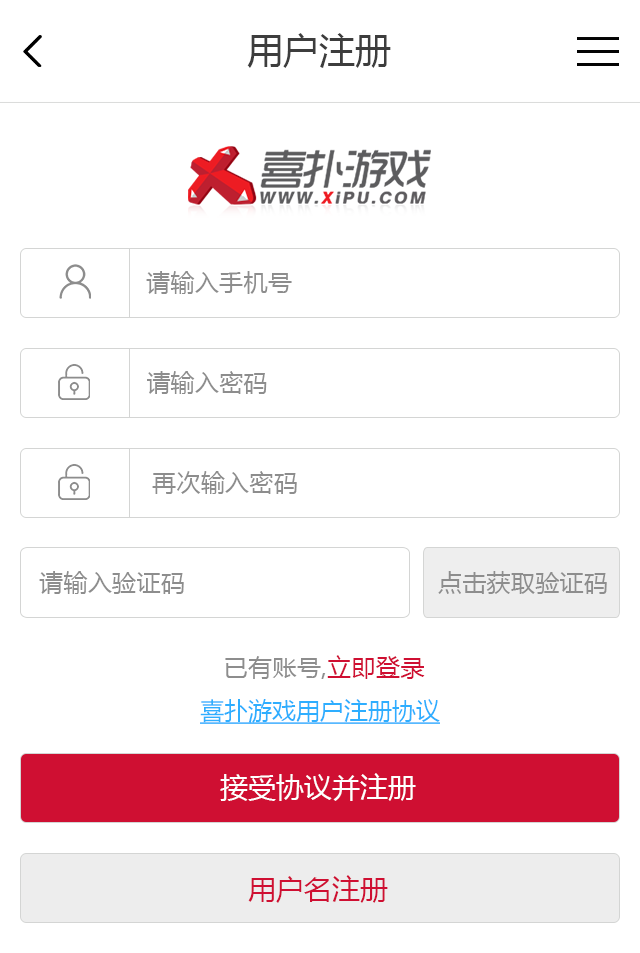
<style>
.page{position:relative;width:640px;height:953px;background:#ffffff}
.page>*{position:absolute;margin:0}
.t1{font:36px "MicrosoftYaHei";color:#3d3d3d}
.t2{font:24px "MicrosoftYaHei";letter-spacing:0.015em;color:#8d8d8d}
.t3{font:24px "MicrosoftYaHei";letter-spacing:0.015em;color:#cf0f32}
.t4{font:24px "MicrosoftYaHei";color:#2eaeff;text-decoration:underline}
.t5{font:28px "MicrosoftYaHei";color:#ffffff}
.t6{font:28px "MicrosoftYaHei";color:#cf0f32}
</style>
<div class="page">
<p class="t1" style="left:247px;top:33px;width:144px;height:35px">用户注册</p>
<p class="t2" style="left:146px;top:271px;width:146px;height:23px">请输入手机号</p>
<p class="t2" style="left:147px;top:371px;width:120px;height:23px">请输入密码</p>
<p class="t2" style="left:152px;top:471px;width:145px;height:23px">再次输入密码</p>
<p class="t2" style="left:39px;top:571px;width:145px;height:23px">请输入验证码</p>
<p class="t2" style="left:438px;top:571px;width:169px;height:23px">点击获取验证码</p>
<p class="t2" style="left:225px;top:655px;width:200px;height:24px">已有账号,<span class="t3">立即登录</span></p>
<p class="t4" style="left:200px;top:699px;width:240px;height:25px">喜扑游戏用户注册协议</p>
<p class="t5" style="left:220px;top:773px;width:196px;height:28px">接受协议并注册</p>
<p class="t6" style="left:248px;top:875px;width:140px;height:28px">用户名注册</p>
</div>
